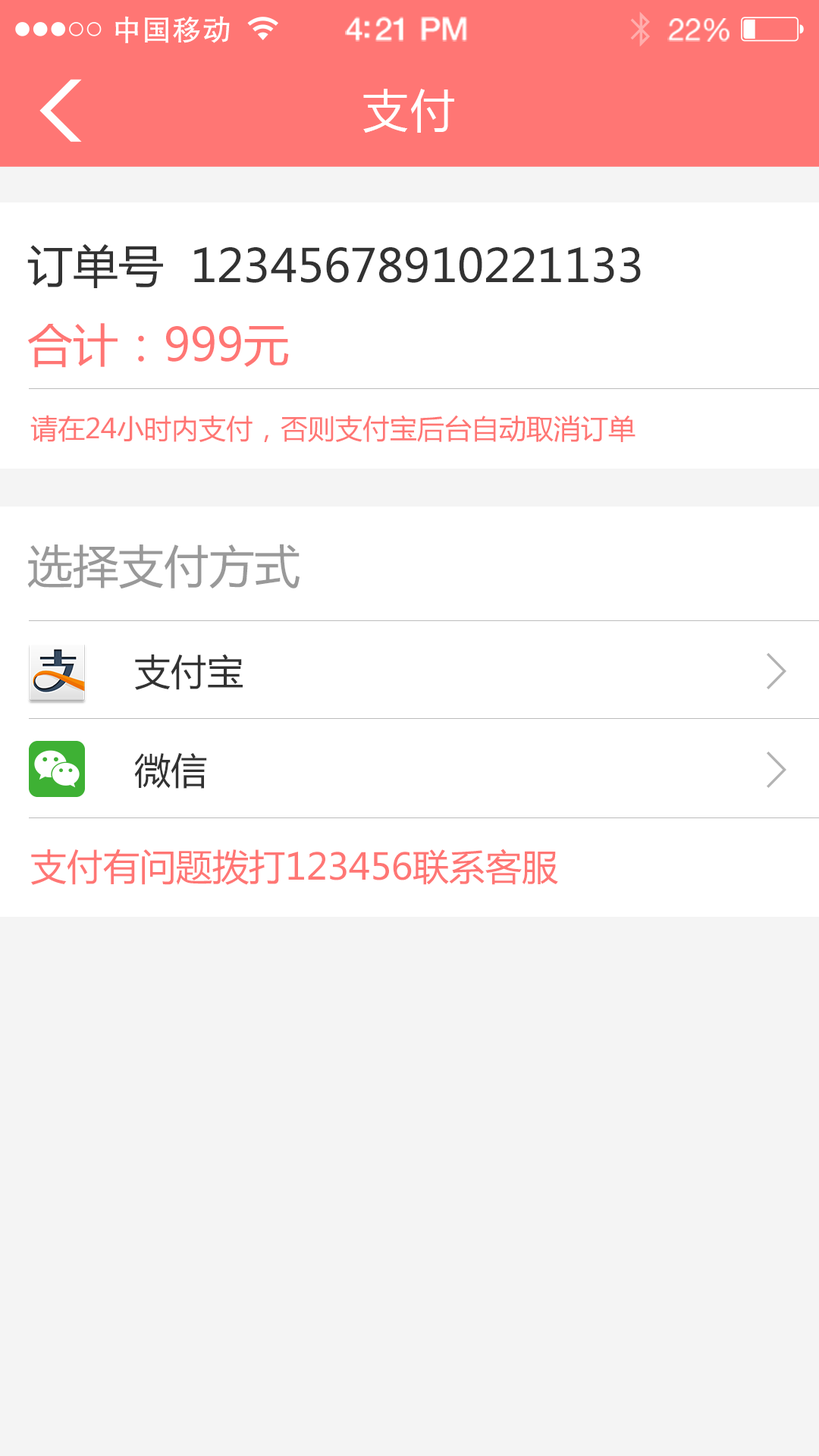
<style>
.page{position:relative;width:819px;height:1456px;background:#f4f4f4}
.page>*{position:absolute;margin:0}
.t1{font:29.4px "FZHTJW--GB1-0";letter-spacing:0.02em;color:#ffffff}
.t2{font:32px "HelveticaNeue-Medium";letter-spacing:-0.02em;color:#ffffff}
.t3{font:30.7px "HelveticaNeue";letter-spacing:-0.02em;color:#ffffff}
.t4{font:45.5px "MicrosoftYaHei";letter-spacing:0.05em;color:#ffffff}
.t5{font:45.5px "MicrosoftYaHei";color:#323232}
.t6{font:45.5px "MicrosoftYaHei";color:#ff7674}
.t7{font:27.3px "MicrosoftYaHei";color:#ff7674}
.t8{font:45.5px "MicrosoftYaHei";color:#999999}
.t9{font:36.4px "MicrosoftYaHei";color:#323232}
.t10{font:36.4px "MicrosoftYaHei";color:#ff7674}
</style>
<div class="page">
<p class="t1" style="left:115px;top:16px;width:115px;height:27px">中国移动</p>
<p class="t2" style="left:345px;top:17px;width:122px;height:25px">4:21 PM</p>
<p class="t3" style="left:667px;top:18px;width:63px;height:24px">22%</p>
<p class="t4" style="left:363px;top:89px;width:91px;height:44px">支付</p>
<p class="t5" style="left:27px;top:243px;width:614px;height:45px">订单号  12345678910221133</p>
<p class="t6" style="left:27px;top:323px;width:262px;height:45px">合计：999元</p>
<p class="t7" style="left:30px;top:415px;width:605px;height:27px">请在24小时内支付，否则支付宝后台自动取消订单</p>
<p class="t8" style="left:27px;top:544px;width:273px;height:45px">选择支付方式</p>
<p class="t9" style="left:135px;top:654px;width:108px;height:36px">支付宝</p>
<p class="t9" style="left:134px;top:753px;width:73px;height:36px">微信</p>
<p class="t10" style="left:31px;top:849px;width:527px;height:36px">支付有问题拨打123456联系客服</p>
</div>
